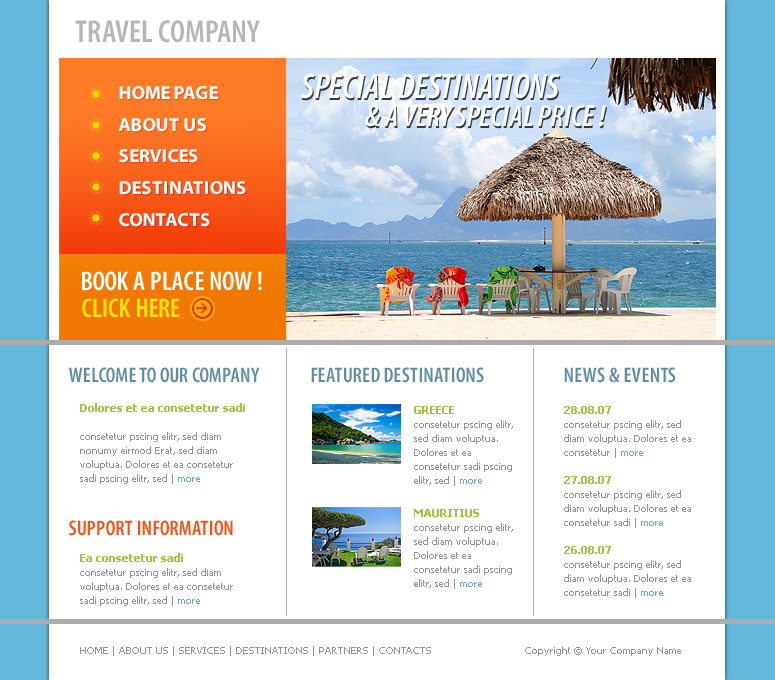
<style>
.page{position:relative;width:775px;height:680px;background:#ffffff}
.page>*{position:absolute;margin:0}
.t1{font:32px "MyriadPro-SemiboldCond";color:#b7b5b6;text-transform:uppercase}
.t2{font:30.7px/28px "MyriadPro-SemiboldCondIt";color:#ffffff;text-transform:uppercase}
.t3{font:35.7px/28px "MyriadPro-SemiboldCondIt";color:#ffffff;text-transform:uppercase}
.t4{font:19px "MyriadPro-Bold";color:#ffffff;text-transform:uppercase}
.t5{font:27px "MyriadPro-SemiboldCond";color:#ffffff;text-transform:uppercase}
.t6{font:27px "MyriadPro-SemiboldCond";color:#ffe400;text-transform:uppercase}
.t7{font:21px "MyriadPro-SemiboldCond";color:#5f8ea4;text-transform:uppercase}
.t8{font:10px/14px "Tahoma";color:#929292}
.t9{font:11px/14px "Tahoma-Bold";color:#9ac93f}
.t10{font:10px/14px "Tahoma";color:#64abd0}
.t11{font:21px "MyriadPro-SemiboldCond";color:#f65012;text-transform:uppercase}
.t12{font:10px "Tahoma";color:#929292;text-transform:uppercase}
.t13{font:10px "Tahoma";color:#929292}
</style>
<div class="page">
<p class="t1" style="left:75px;top:20px;width:185px;height:23px">TRAVEL COMPANY</p>
<p class="t2" style="left:300px;top:73px;width:307px;height:54px"><span class="t3">SPECIAL DESTINATIONS<br>     </span>         &amp; A VERY SPECIAL PRICE !</p>
<p class="t4" style="left:119px;top:86px;width:99px;height:14px">HOME PAGE</p>
<p class="t4" style="left:118px;top:118px;width:88px;height:14px">ABOUT US</p>
<p class="t4" style="left:119px;top:149px;width:79px;height:14px">SERVICES</p>
<p class="t4" style="left:119px;top:181px;width:127px;height:14px">DESTINATIONS</p>
<p class="t4" style="left:119px;top:213px;width:91px;height:14px">CONTACTS</p>
<p class="t5" style="left:82px;top:271px;width:180px;height:20px">BOOK A PLACE NOW !</p>
<p class="t6" style="left:82px;top:298px;width:98px;height:20px">CLICK HERE</p>
<p class="t7" style="left:69px;top:367px;width:191px;height:16px">welcome to our company</p>
<p class="t7" style="left:311px;top:367px;width:173px;height:16px">featured destinations</p>
<p class="t7" style="left:564px;top:367px;width:112px;height:16px">news &amp; events</p>
<p class="t8" style="left:80px;top:403px;width:165px;height:81px"><span class="t9">Dolores et ea consetetur sadi <br><br></span>consetetur pscing elitr, sed diam nonumy eirmod Erat, sed diam voluptua. Dolores et ea consetetur sadi pscing elitr, sed | <span class="t10">more</span></p>
<p class="t8" style="left:414px;top:406px;width:99px;height:80px"><span class="t9">GREECE<br></span>consetetur pscing elitr, sed diam voluptua. Dolores et ea consetetur sadi pscing elitr, sed | <span class="t10">more</span></p>
<p class="t8" style="left:564px;top:406px;width:127px;height:192px"><span class="t9">28.08.07<br></span>consetetur pscing elitr, sed diam voluptua. Dolores et ea consetetur | <span class="t10">more<br><br></span><span class="t9">27.08.07<br></span>consetetur pscing elitr, sed diam voluptua. Dolores et ea consetetur sadi | <span class="t10">more<br><br></span><span class="t9">26.08.07<br></span>consetetur pscing elitr, sed diam voluptua. Dolores et ea consetetur sadi | <span class="t10">more</span></p>
<p class="t8" style="left:414px;top:509px;width:99px;height:80px"><span class="t9">MAURITIUS<br></span>consetetur pscing elitr, sed diam voluptua. Dolores et ea consetetur sadi pscing elitr, sed | <span class="t10">more</span></p>
<p class="t11" style="left:69px;top:520px;width:164px;height:16px">support information</p>
<p class="t8" style="left:80px;top:553px;width:153px;height:53px"><span class="t9">Ea consetetur sadi <br></span>consetetur pscing elitr, sed diam voluptua. Dolores et ea consetetur sadi pscing elitr, sed | <span class="t10">more</span></p>
<p class="t12" style="left:80px;top:646px;width:351px;height:10px">HOME | ABOUT US | SERVICES | DESTINATIONS | Partners | ContactS</p>
<p class="t13" style="left:525px;top:646px;width:156px;height:10px">Copyright © Your Company Name</p>
</div>
